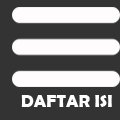
<style>
.page{position:relative;width:120px;height:120px;background:#333333}
.page>*{position:absolute;margin:0}
.t1{font:18px "BerlinSansFBDemi-Bold";color:#ffffff}
</style>
<div class="page">
<p class="t1" style="left:21px;top:95px;width:91px;height:12px">DAFTAR ISI</p>
</div>
